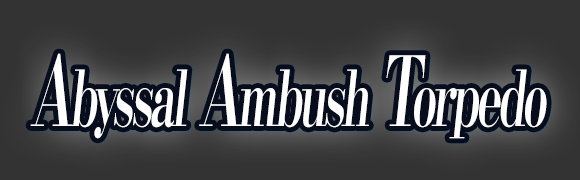
<style>
.page{position:relative;width:580px;height:180px;background:#333333}
.page>*{position:absolute;margin:0}
.t1{font:76.8px "KochoStd-Heavy";letter-spacing:-0.08em;color:#ffffff;font-style:italic;scale:0.6 1}
.t2{font:96px "KochoStd-Heavy";letter-spacing:-0.08em;color:#ffffff;font-style:italic;scale:0.6 1}
</style>
<div class="page">
<p class="t1" style="left:30px;top:53px;width:517px;height:86px"><span class="t2">A</span>byssal<span class="t2"> A</span>mbush<span class="t2"> T</span>orpedo</p>
</div>
